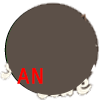
<style>
.page{position:relative;width:100px;height:100px;background:#5c5048}
.page>*{position:absolute;margin:0}
.t1{font:19.8px "NanumBarunGothicOTF";letter-spacing:0.075em;color:#ff0000;font-weight:bold;scale:0.91 1}
</style>
<div class="page">
<p class="t1" style="left:17px;top:68px;width:26px;height:16px">AN</p>
</div>
